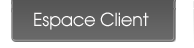
<style>
.page{position:relative;width:194px;height:48px;background:#ffffff}
.page>*{position:absolute;margin:0}
.t1{font:18px "AvantGardeLT-Book";letter-spacing:-0.02em;color:#fffefe}
</style>
<div class="page">
<p class="t1" style="left:34px;top:12px;width:115px;height:18px">Espace Client</p>
</div>
